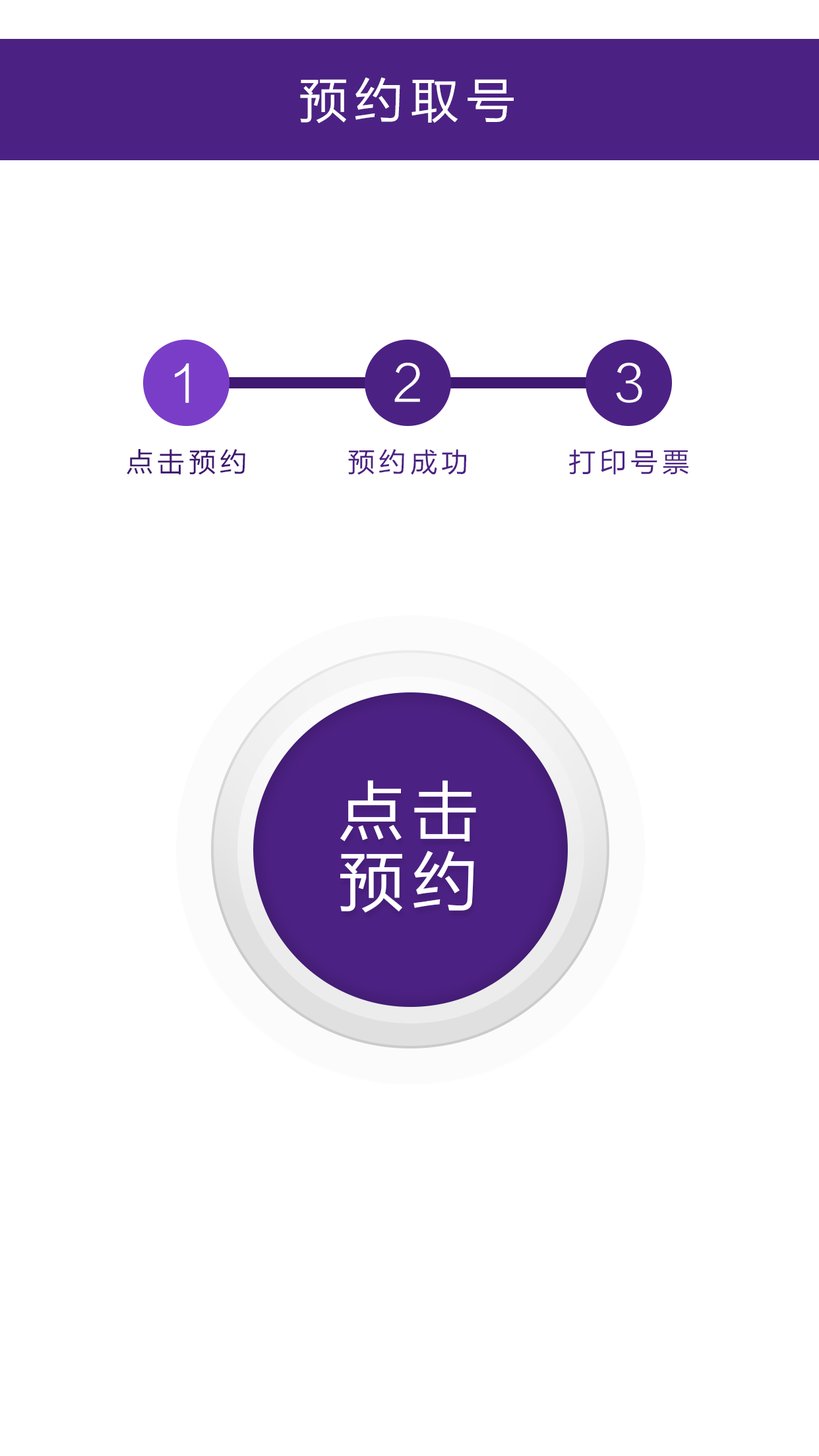
<style>
.page{position:relative;width:819px;height:1456px;background:#ffffff}
.page>*{position:absolute;margin:0}
.t1{font:49px "FZLTHJW--GB1-0";letter-spacing:0.14em;color:#ffffff}
.t2{font:51px "FZLTXHK";color:#ffffff}
.t3{font:27.4px "FZLTHJW--GB1-0";letter-spacing:0.14em;color:#3f1871}
.t4{font:27.4px "FZLTHJW--GB1-0";letter-spacing:0.14em;color:#4c2184}
.t5{font:65.9px/70.6px "FZLTHJW--GB1-0";letter-spacing:0.12em;color:#ffffff}
</style>
<div class="page">
<p class="t1" style="left:300px;top:77px;width:214px;height:46px">预约取号</p>
<p class="t2" style="left:175px;top:363px;width:14px;height:40px">1</p>
<p class="t2" style="left:394px;top:363px;width:26px;height:39px">2</p>
<p class="t2" style="left:616px;top:363px;width:26px;height:40px">3</p>
<p class="t3" style="left:127px;top:449px;width:118px;height:26px">点击预约</p>
<p class="t4" style="left:348px;top:449px;width:118px;height:26px">预约成功</p>
<p class="t4" style="left:569px;top:449px;width:119px;height:26px">打印号票</p>
<p class="t5" style="left:340px;top:780px;width:136px;height:133px;text-align:center">点击<br>预约</p>
</div>
